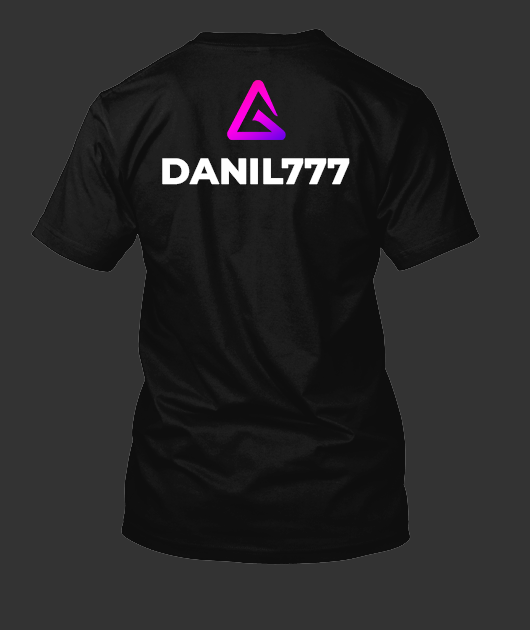
<style>
.page{position:relative;width:530px;height:630px;background:#333333}
.page>*{position:absolute;margin:0}
.t1{font:36.6px "MontserratRoman-ExtraBold";color:#ffffff;text-transform:uppercase}
</style>
<div class="page">
<p class="t1" style="left:162px;top:158px;width:188px;height:27px">danil777</p>
</div>
